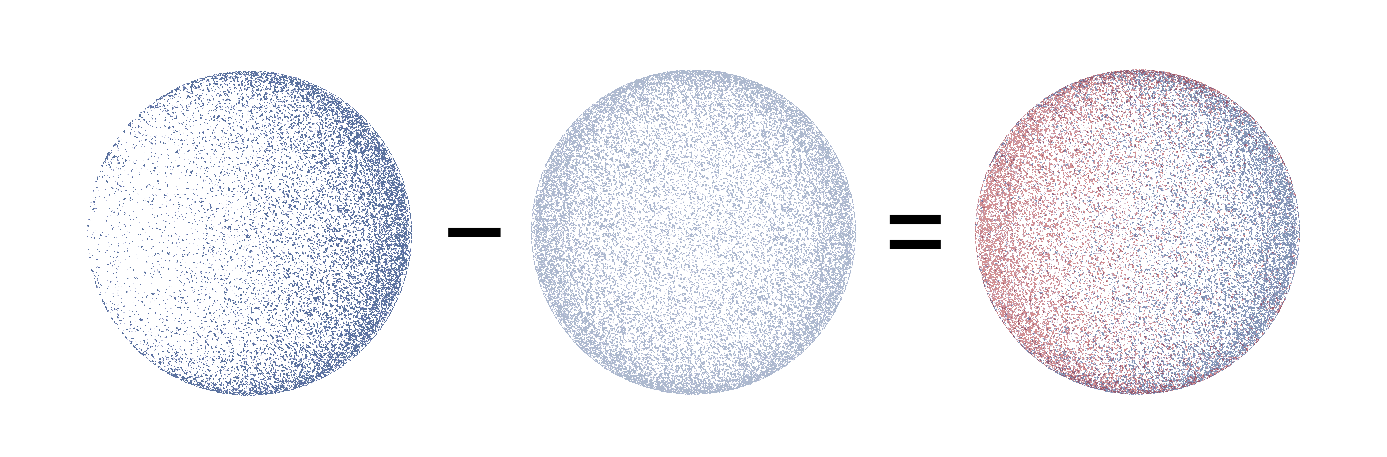
<style>
.page{position:relative;width:1387px;height:457px;background:#ffffff}
.page>*{position:absolute;margin:0}
.t1{font:128px "FiraCode-Regular";color:#000000}
</style>
<div class="page">
<p class="t1" style="left:889px;top:214px;width:52px;height:35px">=</p>
<p class="t1" style="left:448px;top:227px;width:53px;height:10px">-</p>
</div>
